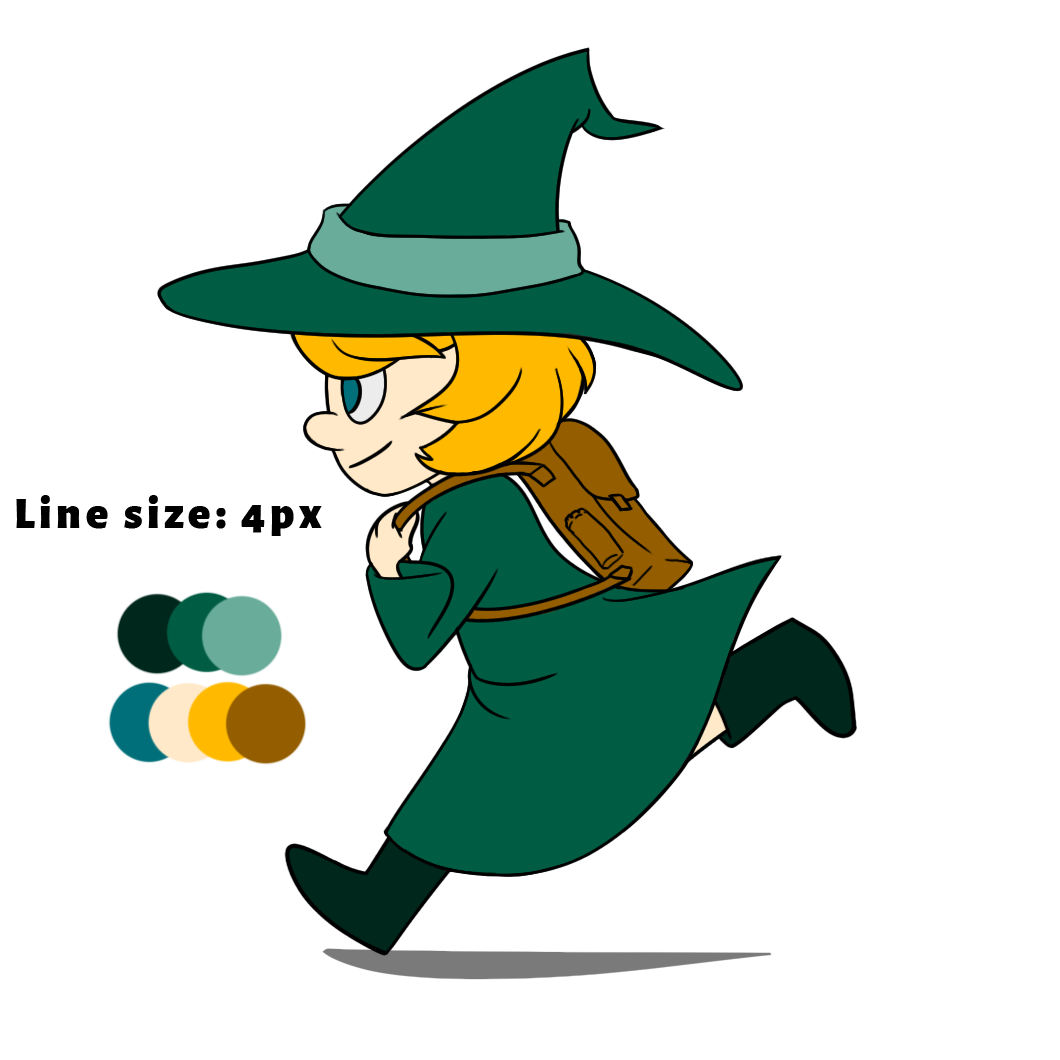
<style>
.page{position:relative;width:1060px;height:1060px;background:#ffffff}
.page>*{position:absolute;margin:0}
.t1{font:45.8px "AlegreyaSans-Black";letter-spacing:0.1em;color:#000000}
</style>
<div class="page">
<p class="t1" style="left:16px;top:495px;width:306px;height:41px">Line size: 4px</p>
</div>
